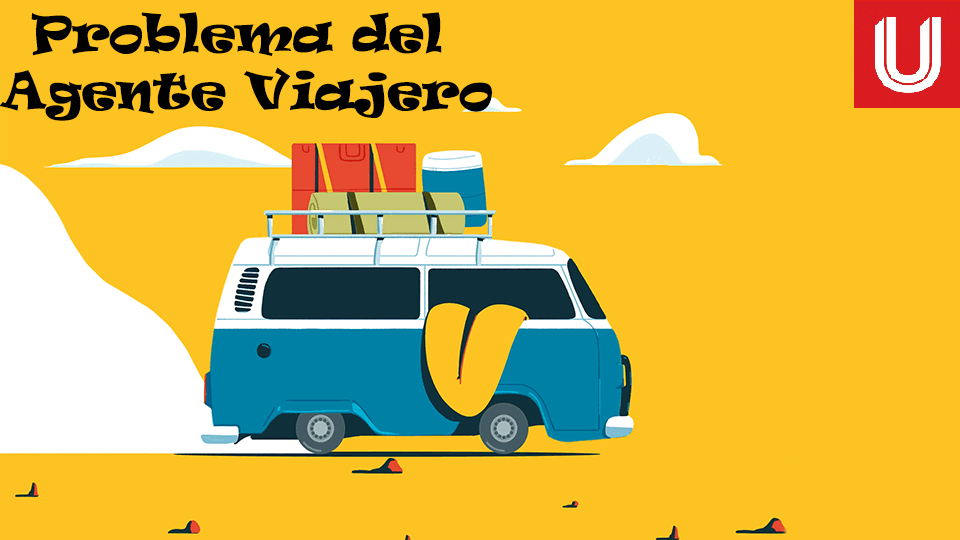
<style>
.page{position:relative;width:960px;height:540px;background:#fdc323}
.page>*{position:absolute;margin:0}
.t1{font:48px "Ravie";color:#010101}
</style>
<div class="page">
<p class="t1" style="left:0px;top:12px;width:492px;height:109px;text-align:center">Problema del <br>Agente Viajero</p>
</div>
